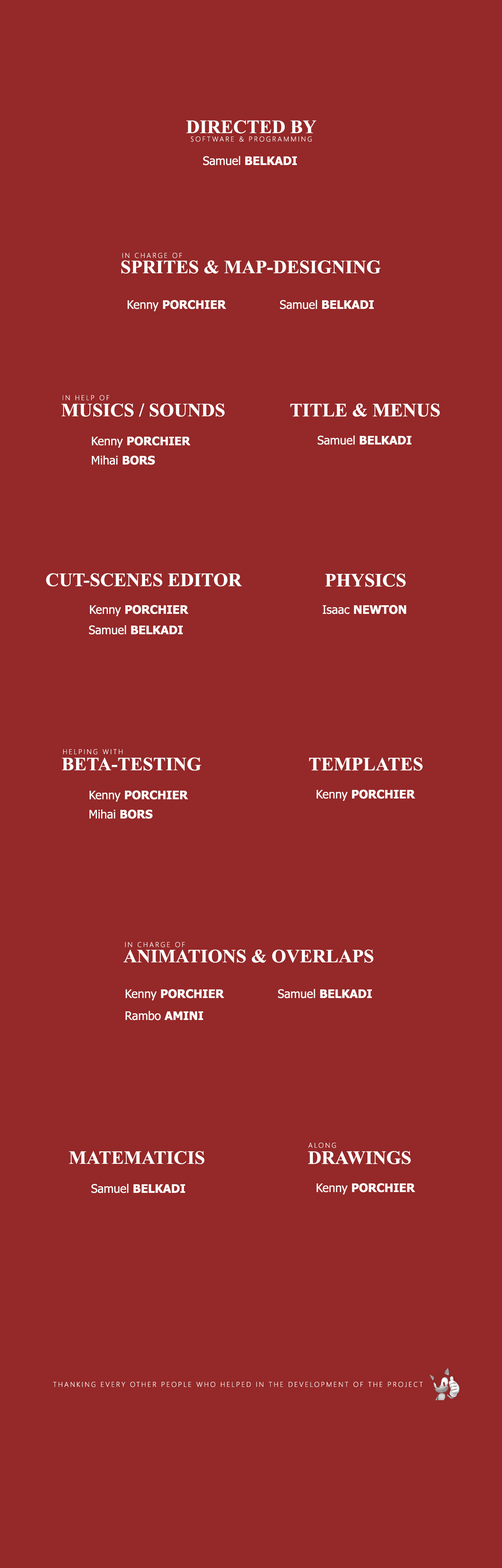
<style>
.page{position:relative;width:502px;height:1568px;background:#952828}
.page>*{position:absolute;margin:0}
.t1{font:18.8px "TimesNewRomanPS-BoldMT";color:#ffffff}
.t2{font:7.1px "SegoeUI-Light";letter-spacing:0.2em;color:#ffffff}
.t3{font:11.8px "Tahoma-Bold";color:#ffffff}
.t4{font:11.8px "Tahoma";color:#ffffff}
</style>
<div class="page">
<p class="t1" style="left:186px;top:120px;width:130px;height:14px">DIRECTED BY</p>
<p class="t2" style="left:191px;top:136px;width:121px;height:6px">SOFTWARE &amp; PROGRAMMING</p>
<p class="t3" style="left:203px;top:156px;width:94px;height:9px"><span class="t4">Samuel </span>BELKADI</p>
<p class="t2" style="left:122px;top:253px;width:60px;height:5px">IN CHARGE OF</p>
<p class="t1" style="left:121px;top:260px;width:260px;height:14px">SPRITES &amp; MAP-DESIGNING</p>
<p class="t3" style="left:127px;top:300px;width:99px;height:11px"><span class="t4">Kenny </span>PORCHIER</p>
<p class="t3" style="left:280px;top:300px;width:94px;height:9px"><span class="t4">Samuel </span>BELKADI</p>
<p class="t2" style="left:63px;top:395px;width:46px;height:6px">IN HELP OF</p>
<p class="t1" style="left:61px;top:403px;width:164px;height:14px">MUSICS / SOUNDS</p>
<p class="t1" style="left:290px;top:403px;width:150px;height:14px">TITLE &amp; MENUS</p>
<p class="t3" style="left:92px;top:436px;width:99px;height:12px"><span class="t4">Kenny </span>PORCHIER</p>
<p class="t3" style="left:318px;top:436px;width:93px;height:9px"><span class="t4">Samuel </span>BELKADI</p>
<p class="t4" style="left:92px;top:456px;width:63px;height:9px">Mihai <span class="t3">BORS</span></p>
<p class="t1" style="left:46px;top:573px;width:196px;height:13px">CUT-SCENES EDITOR</p>
<p class="t1" style="left:325px;top:573px;width:81px;height:14px">PHYSICS</p>
<p class="t3" style="left:90px;top:605px;width:99px;height:11px"><span class="t4">Kenny </span>PORCHIER</p>
<p class="t3" style="left:323px;top:605px;width:83px;height:9px"><span class="t4">Isaac </span>NEWTON</p>
<p class="t3" style="left:89px;top:625px;width:94px;height:10px"><span class="t4">Samuel </span>BELKADI</p>
<p class="t2" style="left:63px;top:749px;width:60px;height:6px">HELPING WITH</p>
<p class="t1" style="left:62px;top:757px;width:139px;height:14px">BETA-TESTING</p>
<p class="t1" style="left:309px;top:757px;width:114px;height:14px">TEMPLATES</p>
<p class="t3" style="left:89px;top:790px;width:99px;height:12px"><span class="t4">Kenny </span>PORCHIER</p>
<p class="t3" style="left:316px;top:789px;width:99px;height:12px"><span class="t4">Kenny </span>PORCHIER</p>
<p class="t4" style="left:89px;top:809px;width:63px;height:10px">Mihai <span class="t3">BORS</span></p>
<p class="t2" style="left:125px;top:942px;width:60px;height:5px">IN CHARGE OF</p>
<p class="t1" style="left:123px;top:949px;width:250px;height:14px">ANIMATIONS &amp; OVERLAPS</p>
<p class="t3" style="left:125px;top:989px;width:99px;height:11px"><span class="t4">Kenny </span>PORCHIER</p>
<p class="t3" style="left:278px;top:989px;width:94px;height:9px"><span class="t4">Samuel </span>BELKADI</p>
<p class="t4" style="left:125px;top:1011px;width:78px;height:9px">Rambo <span class="t3">AMINI</span></p>
<p class="t2" style="left:308px;top:1143px;width:28px;height:5px">ALONG</p>
<p class="t1" style="left:69px;top:1151px;width:135px;height:13px">MATEMATICIS</p>
<p class="t1" style="left:308px;top:1151px;width:103px;height:13px">DRAWINGS</p>
<p class="t3" style="left:91px;top:1184px;width:94px;height:9px"><span class="t4">Samuel </span>BELKADI</p>
<p class="t3" style="left:316px;top:1183px;width:99px;height:11px"><span class="t4">Kenny </span>PORCHIER</p>
<p class="t2" style="left:53px;top:1382px;width:370px;height:5px">THANKING EVERY OTHER PEOPLE WHO HELPED IN THE DEVELOPMENT OF THE PROJECT</p>
</div>
